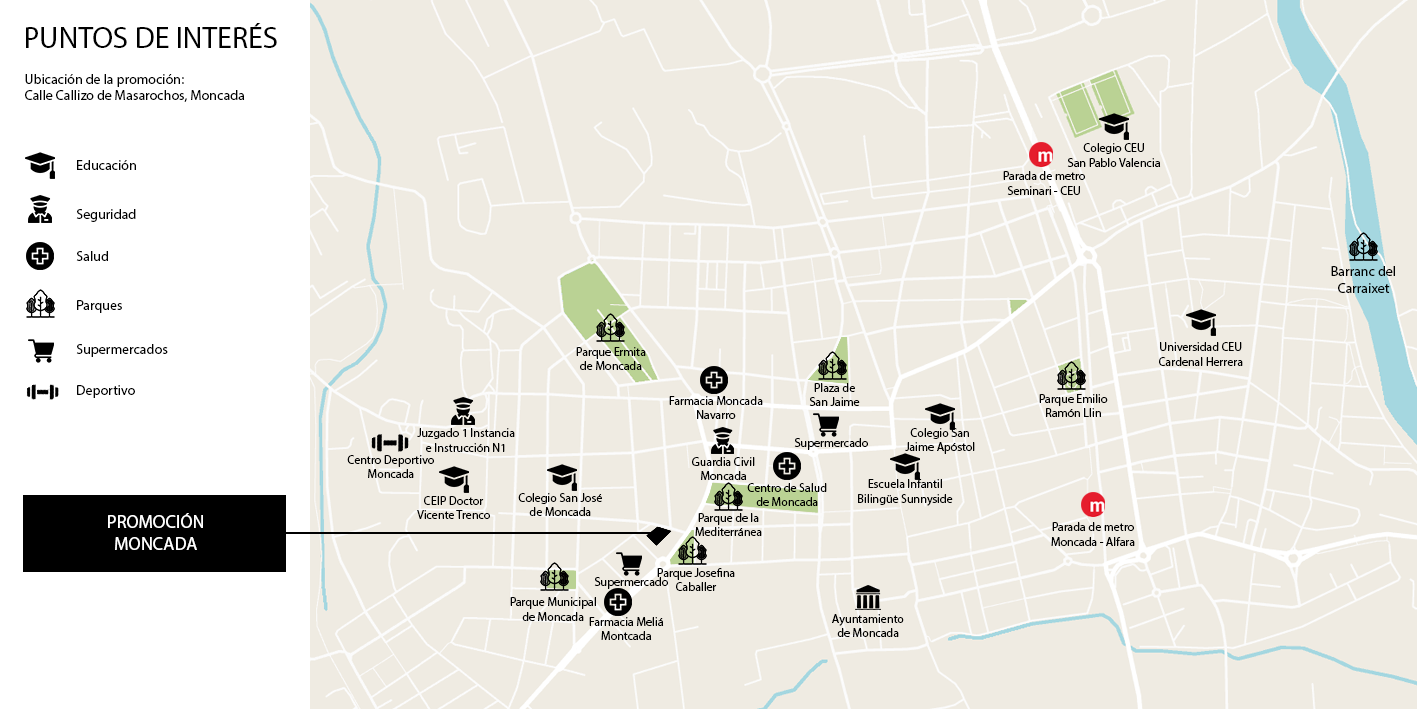
<style>
.page{position:relative;width:1417px;height:709px;background:#efebe2}
.page>*{position:absolute;margin:0}
.t1{font:30px "MyriadPro-Regular";color:#000000}
.t2{font:14px "MyriadPro-Regular";color:#000000}
.t3{font:12px "MyriadPro-Regular";color:#000000}
.t4{font:18px "MyriadPro-Regular";color:#ffffff}
</style>
<div class="page">
<p class="t1" style="left:26px;top:23px;width:251px;height:25px">PUNTOS DE INTERÉS</p>
<p class="t2" style="left:25px;top:74px;width:220px;height:28px">Ubicación de la promoción:<br>Calle Callizo de Masarochos, Moncada</p>
<p class="t3" style="left:1067px;top:143px;width:94px;height:24px;text-align:center">Colegio CEU<br>San Pablo Valencia</p>
<p class="t2" style="left:77px;top:160px;width:59px;height:10px">Educación</p>
<p class="t3" style="left:1003px;top:171px;width:82px;height:24px;text-align:center">Parada de metro<br>Seminari - CEU</p>
<p class="t2" style="left:76px;top:209px;width:60px;height:13px">Seguridad</p>
<p class="t2" style="left:76px;top:251px;width:32px;height:10px">Salud</p>
<p class="t2" style="left:1331px;top:266px;width:64px;height:27px;text-align:center">Barranc del<br>Carraixet</p>
<p class="t2" style="left:77px;top:300px;width:45px;height:13px">Parques</p>
<p class="t3" style="left:1159px;top:342px;width:84px;height:24px;text-align:center">Universidad CEU<br>Cardenal Herrera</p>
<p class="t2" style="left:76px;top:344px;width:92px;height:13px">Supermercados</p>
<p class="t3" style="left:576px;top:347px;width:70px;height:23px;text-align:center">Parque Ermita<br>de Moncada</p>
<p class="t2" style="left:77px;top:385px;width:58px;height:13px">Deportivo</p>
<p class="t3" style="left:809px;top:383px;width:51px;height:23px;text-align:center">Plaza de<br>San Jaime</p>
<p class="t3" style="left:669px;top:396px;width:94px;height:23px;text-align:center">Farmacia Moncada<br>Navarro</p>
<p class="t3" style="left:1039px;top:394px;width:69px;height:23px;text-align:center">Parque Emilio<br>Ramón Llin</p>
<p class="t3" style="left:417px;top:428px;width:98px;height:24px;text-align:center">Juzgado 1 Instancia<br>e Instrucción N1</p>
<p class="t3" style="left:794px;top:438px;width:74px;height:12px">Supermercado</p>
<p class="t3" style="left:905px;top:428px;width:70px;height:26px;text-align:center">Colegio San<br>Jaime Apóstol</p>
<p class="t3" style="left:347px;top:455px;width:87px;height:23px;text-align:center">Centro Deportivo<br>Moncada</p>
<p class="t3" style="left:692px;top:457px;width:63px;height:23px;text-align:center">Guardia Civil<br>Moncada</p>
<p class="t3" style="left:747px;top:483px;width:80px;height:23px;text-align:center">Centro de Salud<br>de Moncada</p>
<p class="t3" style="left:858px;top:479px;width:95px;height:27px;text-align:center">Escuela Infantil<br>Bilingüe Sunnyside</p>
<p class="t3" style="left:417px;top:496px;width:73px;height:23px;text-align:center">CEIP Doctor<br>Vicente Trenco</p>
<p class="t3" style="left:518px;top:493px;width:84px;height:23px;text-align:center">Colegio San José<br>de Moncada</p>
<p class="t4" style="left:108px;top:513px;width:95px;height:37px;text-align:center">PROMOCIÓN<br>MONCADA</p>
<p class="t3" style="left:695px;top:513px;width:67px;height:23px;text-align:center">Parque de la<br>Mediterránea</p>
<p class="t3" style="left:1051px;top:522px;width:84px;height:24px;text-align:center">Parada de metro<br>Moncada - Alfara</p>
<p class="t3" style="left:657px;top:568px;width:78px;height:23px;text-align:center">Parque Josefina<br>Caballer</p>
<p class="t3" style="left:594px;top:577px;width:74px;height:12px">Supermercado</p>
<p class="t3" style="left:510px;top:597px;width:86px;height:24px;text-align:center">Parque Municipal<br>de Moncada</p>
<p class="t3" style="left:589px;top:617px;width:75px;height:23px;text-align:center">Farmacia Meliá<br>Montcada</p>
<p class="t3" style="left:832px;top:614px;width:72px;height:23px;text-align:center">Ayuntamiento<br>de Moncada</p>
</div>
